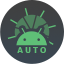
<style>
.page{position:relative;width:64px;height:64px}
.page>*{position:absolute;margin:0}
.t1{font:8px "Ubuntu-Bold";letter-spacing:0.28em;color:#5fbf77}
</style>
<div class="page">
<p class="t1" style="left:17px;top:47px;width:29px;height:6px">AUTO</p>
</div>
